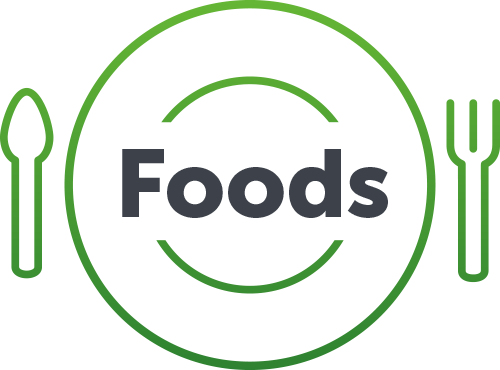
<style>
.page{position:relative;width:500px;height:370px;background:#ffffff}
.page>*{position:absolute;margin:0}
.t1{font:95.4px "MuseoSansCyrl-900";color:#3d424a}
</style>
<div class="page">
<p class="t1" style="left:122px;top:149px;width:266px;height:69px">Foods</p>
</div>
